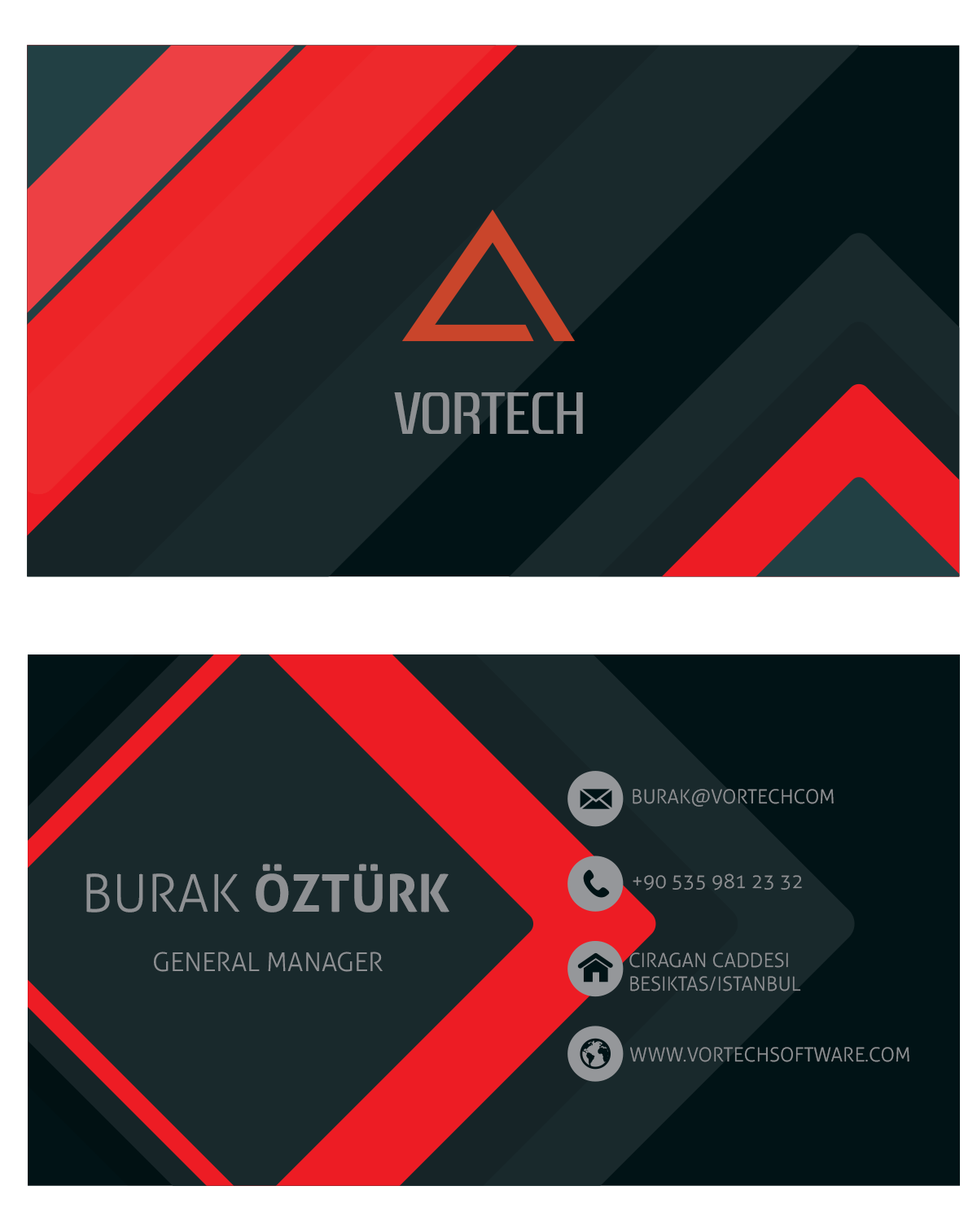
<style>
.page{position:relative;width:977px;height:1221px;background:#19292c}
.page>*{position:absolute;margin:0}
.t1{font:58.6px "ZrnicRg-Regular";color:#8e9093}
.t2{font:19.5px "Aller-Light";color:#8e9093}
.t3{font:52.1px "Aller-Bold";color:#8e9093}
.t4{font:52.1px "Aller-Light";color:#8e9093}
.t5{font:26px "Aller-Light";color:#8e9093}
</style>
<div class="page">
<p class="t1" style="left:394px;top:392px;width:189px;height:42px">VORTECH</p>
<p class="t2" style="left:632px;top:789px;width:201px;height:18px">BURAK@VORTECHCOM</p>
<p class="t3" style="left:86px;top:864px;width:363px;height:48px"><span class="t4">BURAK </span>ÖZTÜRK</p>
<p class="t2" style="left:632px;top:873px;width:170px;height:17px">+90 535 981 23 32</p>
<p class="t5" style="left:154px;top:951px;width:229px;height:21px">GENERAL MANAGER</p>
<p class="t2" style="left:629px;top:952px;width:172px;height:39px">CIRAGAN CADDESI <br>BESIKTAS/ISTANBUL</p>
<p class="t2" style="left:630px;top:1047px;width:279px;height:15px">WWW.VORTECHSOFTWARE.COM</p>
</div>
